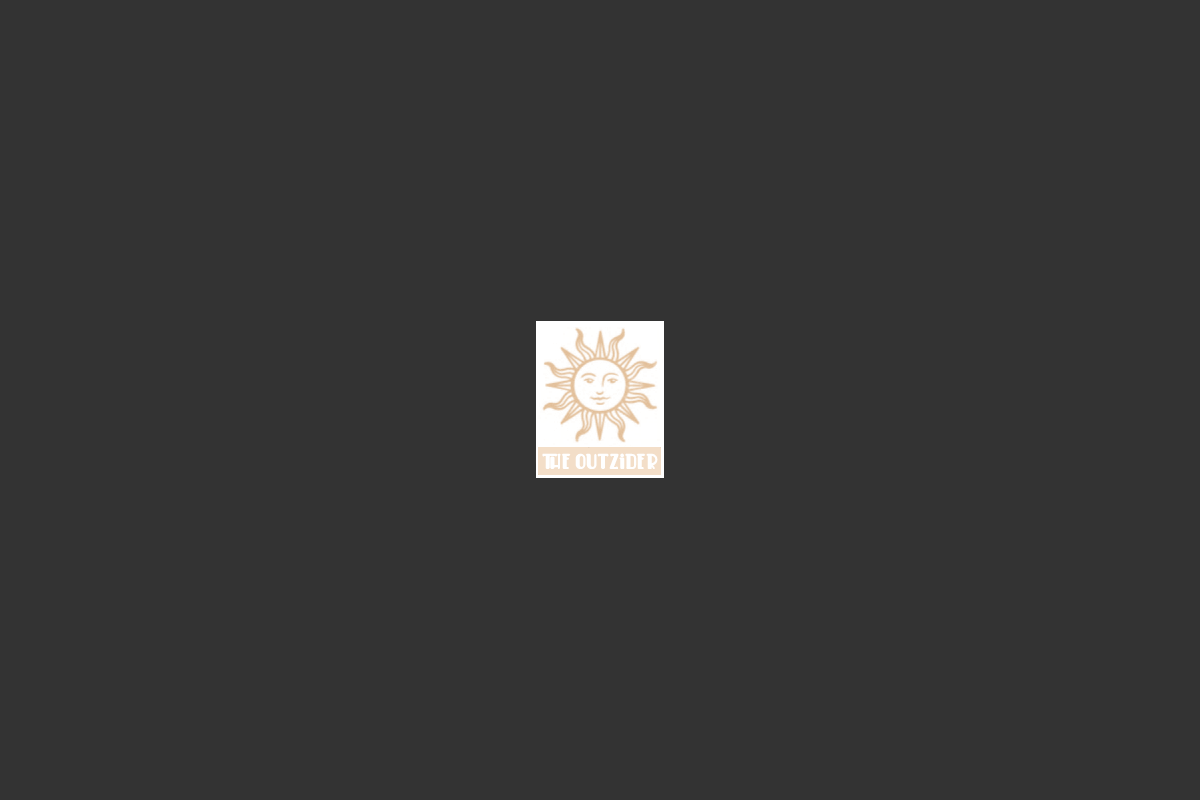
<style>
.page{position:relative;width:1200px;height:800px;background:#333333}
.page>*{position:absolute;margin:0}
.t1{font:24px "CookerCakeDemo";letter-spacing:0.024em;color:#ffffff}
</style>
<div class="page">
<p class="t1" style="left:542px;top:453px;width:116px;height:16px">The Outzider</p>
</div>
